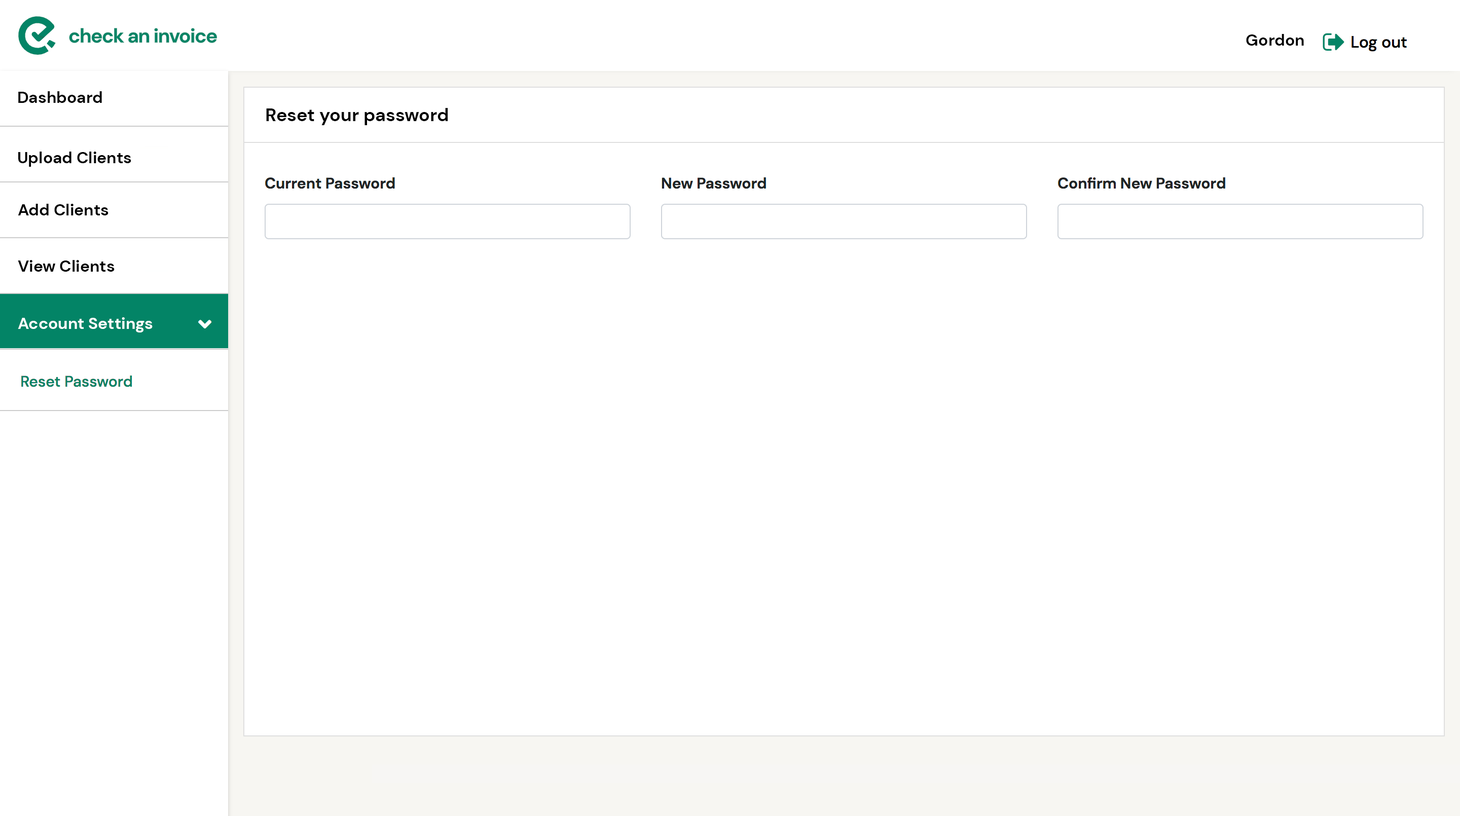
<style>
.page{position:relative;width:1460px;height:816px;background:#ffffff}
.page>*{position:absolute;margin:0}
.t1{font:16.2px "DMSans-Bold";color:#000000}
.t2{font:18.3px "DMSans-Bold";color:#010101}
.t3{font:16.2px "DMSans-Bold";color:#ffffff}
</style>
<div class="page">
<p class="t1" style="left:1246px;top:34px;width:58px;height:12px">Gordon</p>
<p class="t1" style="left:18px;top:91px;width:84px;height:12px">Dashboard</p>
<p class="t2" style="left:266px;top:108px;width:182px;height:17px">Reset your password</p>
<p class="t1" style="left:18px;top:152px;width:113px;height:15px">Upload Clients</p>
<p class="t1" style="left:18px;top:204px;width:91px;height:12px">Add Clients</p>
<p class="t1" style="left:18px;top:260px;width:97px;height:12px">View Clients</p>
<p class="t3" style="left:18px;top:317px;width:135px;height:16px">Account Settings</p>
</div>
